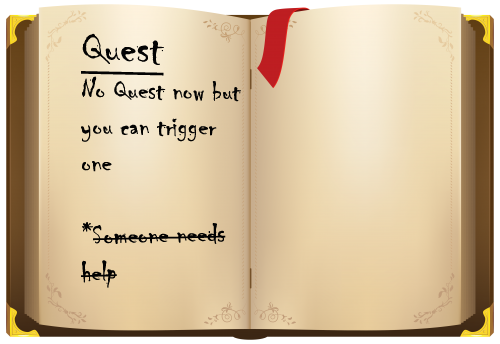
<style>
.page{position:relative;width:500px;height:344px}
.page>*{position:absolute;margin:0}
.t1{font:30px "Chiller-Regular";letter-spacing:0.005em;color:#030303}
.t2{font:48px "Chiller-Regular";letter-spacing:0.005em;color:#030303;text-decoration:underline}
.t3{font:30px "Chiller-Regular";letter-spacing:0.005em;color:#020202}
</style>
<div class="page">
<p class="t1" style="left:81px;top:33px;width:160px;height:255px"><span class="t2">Quest<br></span>No Quest now but<br>you can trigger <br>one<br><br><span class="t3">*Someone needs<br>help</span></p>
</div>
